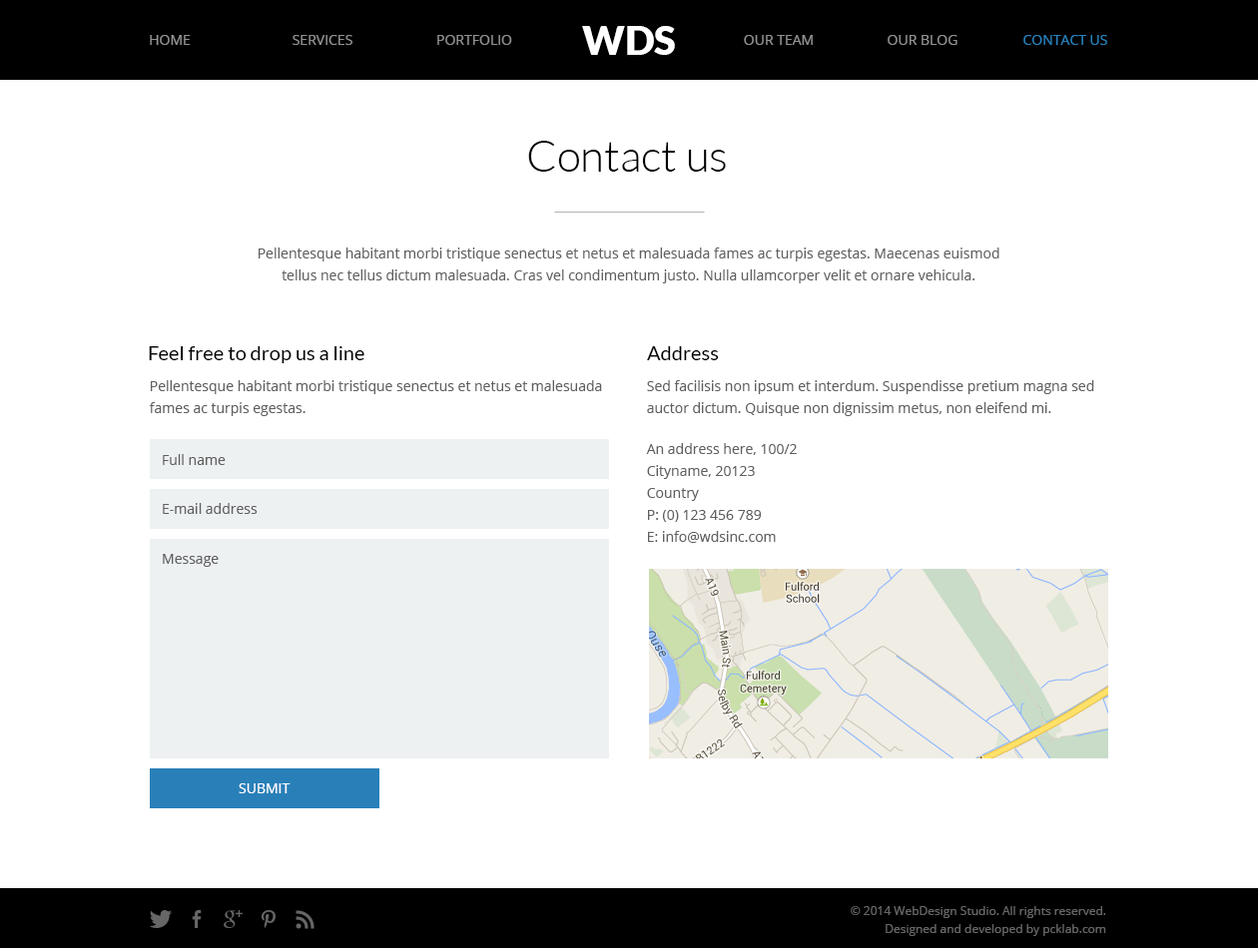
<style>
.page{position:relative;width:1258px;height:948px;background:#ffffff}
.page>*{position:absolute;margin:0}
.t1{font:39.9px "Lato-Black";color:#ffffff;text-transform:uppercase}
.t2{font:14px "OpenSans";color:#909090;text-transform:uppercase}
.t3{font:14px "OpenSans";color:#2980b9;text-transform:uppercase}
.t4{font:43.9px "Lato-Light";color:#000000}
.t5{font:14px/22px "OpenSans";color:#606060}
.t6{font:20px "Lato-Regular";color:#000000}
.t7{font:14px "OpenSans";color:#606060}
.t8{font:14px "OpenSans";color:#ffffff}
.t9{font:12px/18px "OpenSans";color:#666666}
</style>
<div class="page">
<p class="t1" style="left:582px;top:26px;width:93px;height:29px">WDs</p>
<p class="t2" style="left:150px;top:35px;width:41px;height:10px">home</p>
<p class="t2" style="left:292px;top:35px;width:60px;height:10px">services</p>
<p class="t2" style="left:437px;top:35px;width:75px;height:10px">Portfolio</p>
<p class="t2" style="left:744px;top:35px;width:68px;height:10px">our team</p>
<p class="t2" style="left:887px;top:35px;width:70px;height:10px">our blog</p>
<p class="t3" style="left:1023px;top:35px;width:84px;height:10px">Contact us</p>
<p class="t4" style="left:528px;top:141px;width:198px;height:31px">Contact us</p>
<p class="t5" style="left:259px;top:248px;width:740px;height:35px;text-align:center">Pellentesque habitant morbi tristique senectus et netus et malesuada fames ac turpis egestas. Maecenas euismod tellus nec tellus dictum malesuada. Cras vel condimentum justo. Nulla ullamcorper velit et ornare vehicula.</p>
<p class="t6" style="left:149px;top:346px;width:215px;height:17px">Feel free to drop us a line</p>
<p class="t6" style="left:647px;top:346px;width:72px;height:14px">Address</p>
<p class="t5" style="left:149px;top:380px;width:453px;height:36px">Pellentesque habitant morbi tristique senectus et netus et malesuada fames ac turpis egestas.</p>
<p class="t5" style="left:647px;top:380px;width:447px;height:36px">Sed facilisis non ipsum et interdum. Suspendisse pretium magna sed auctor dictum. Quisque non dignissim metus, non eleifend mi.</p>
<p class="t5" style="left:646px;top:443px;width:150px;height:100px">An address here, 100/2<br>Cityname, 20123<br>Country<br>P: (0) 123 456 789<br>E: info@wdsinc.com</p>
<p class="t7" style="left:163px;top:454px;width:63px;height:11px">Full name</p>
<p class="t7" style="left:163px;top:503px;width:95px;height:11px">E-mail address</p>
<p class="t7" style="left:163px;top:554px;width:56px;height:13px">Message</p>
<p class="t8" style="left:239px;top:784px;width:51px;height:9px">SUBMIT</p>
<p class="t9" style="left:850px;top:906px;width:256px;height:30px;text-align:right">© 2014 WebDesign Studio. All rights reserved.<br>Designed and developed by pcklab.com</p>
</div>
